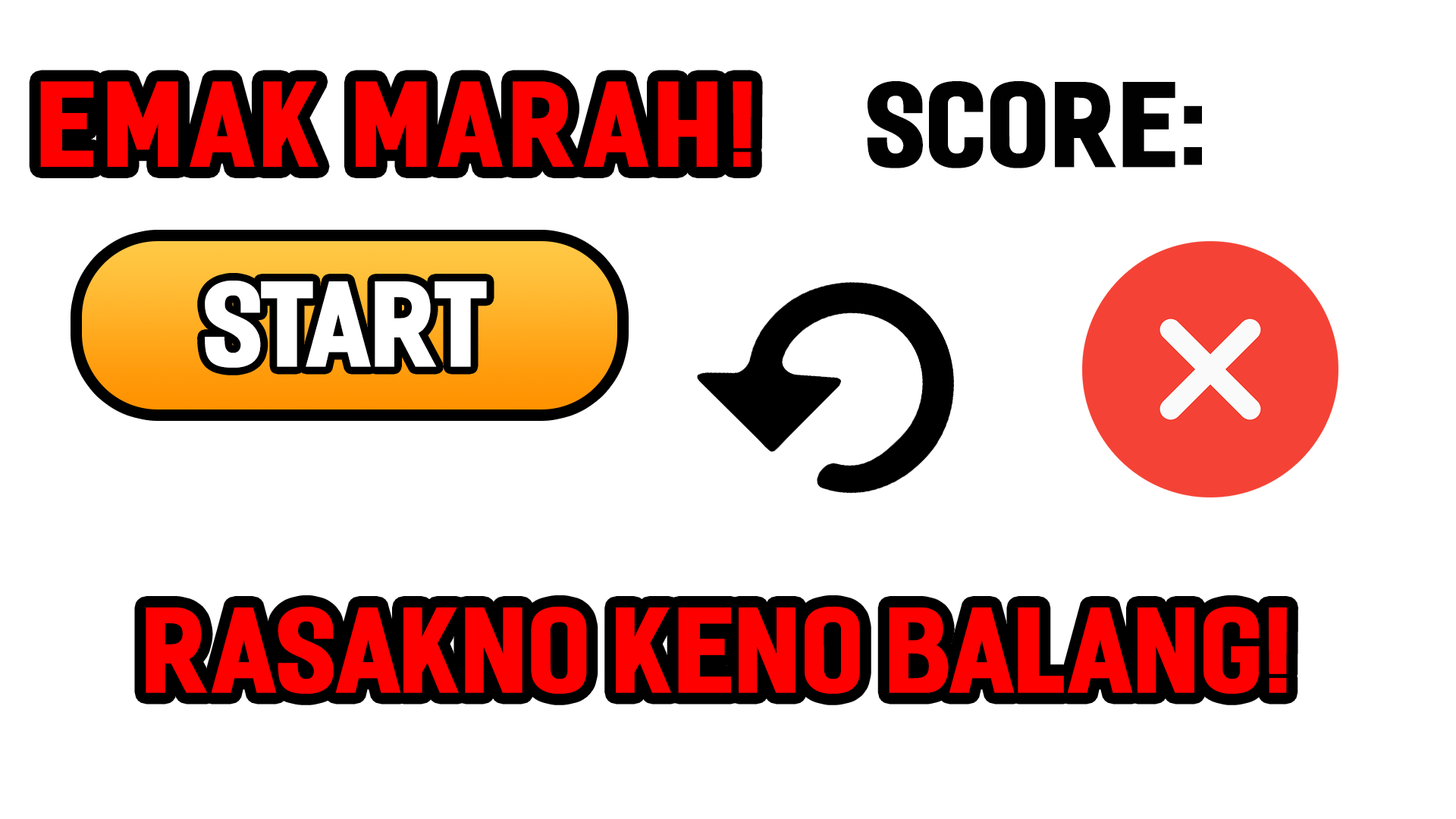
<style>
.page{position:relative;width:1456px;height:819px;background:#ffffff}
.page>*{position:absolute;margin:0}
.t1{font:113.7px "Fester-Semi-condensedHeavy";letter-spacing:0.05em;color:#ff0000}
.t2{font:113.7px "Fester-Semi-condensedHeavy";color:#010101}
.t3{font:113.7px "Fester-Semi-condensedHeavy";color:#ffffff}
.t4{font:113.7px "Fester-Semi-condensedHeavy";color:#fe0000}
</style>
<div class="page">
<p class="t1" style="left:40px;top:81px;width:711px;height:86px">EMAK MARAH!</p>
<p class="t2" style="left:867px;top:81px;width:335px;height:87px">SCORE:</p>
<p class="t3" style="left:205px;top:281px;width:282px;height:87px">START</p>
<p class="t4" style="left:146px;top:607px;width:1141px;height:87px">RASAKNO KENO BALANG!</p>
</div>
